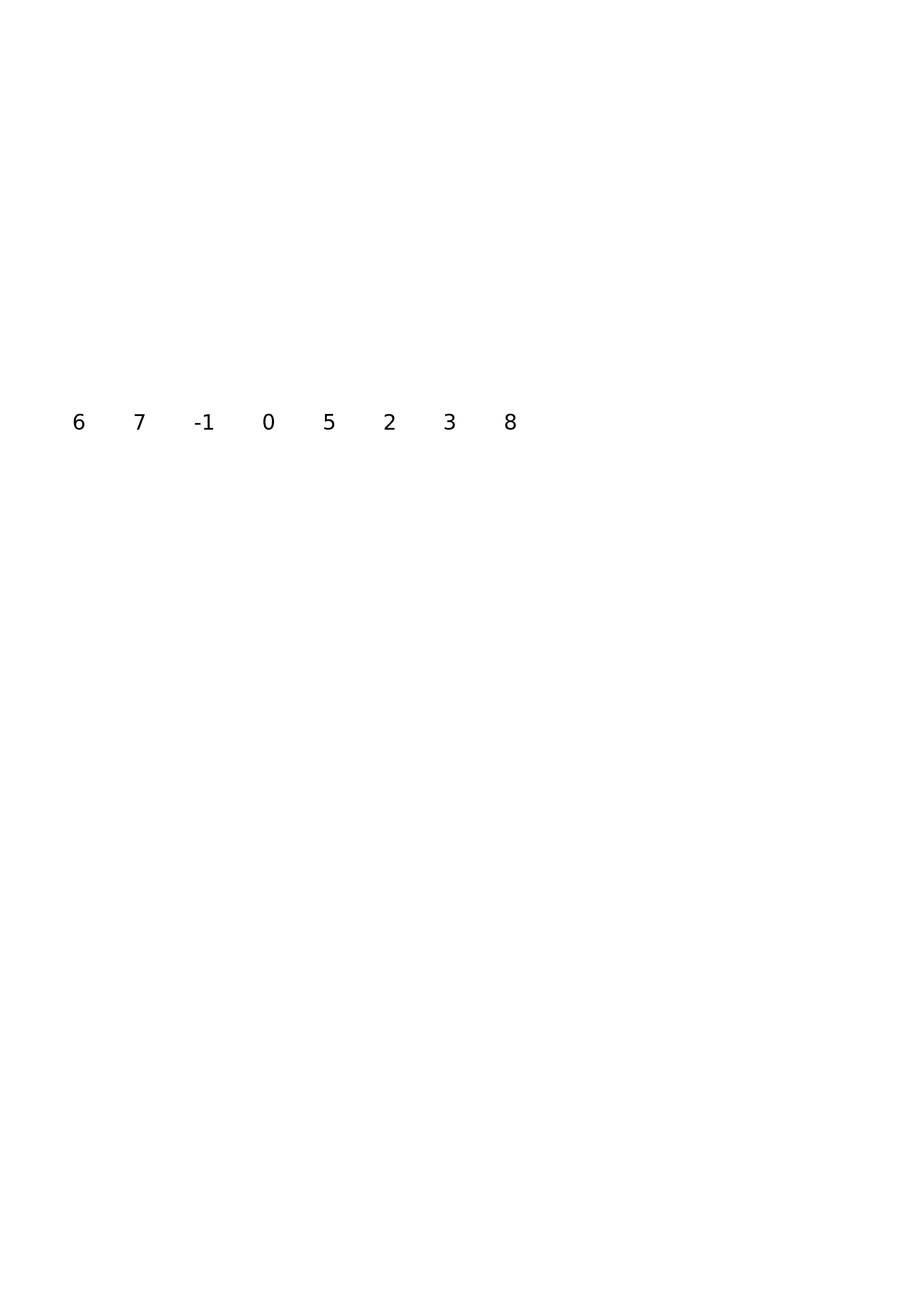
<style>
.page{position:relative;width:918px;height:1299px;background:#ffffff}
.page>*{position:absolute;margin:0}
.t1{font:21.2px "DejaVuSans";color:#000000}
</style>
<div class="page">
<p class="t1" style="left:74px;top:413px;width:11px;height:17px">6</p>
<p class="t1" style="left:135px;top:414px;width:10px;height:16px">7</p>
<p class="t1" style="left:195px;top:414px;width:18px;height:16px">-1</p>
<p class="t1" style="left:263px;top:413px;width:11px;height:17px">0</p>
<p class="t1" style="left:324px;top:414px;width:11px;height:16px">5</p>
<p class="t1" style="left:385px;top:414px;width:10px;height:16px">2</p>
<p class="t1" style="left:445px;top:413px;width:10px;height:17px">3</p>
<p class="t1" style="left:505px;top:413px;width:11px;height:17px">8</p>
</div>
